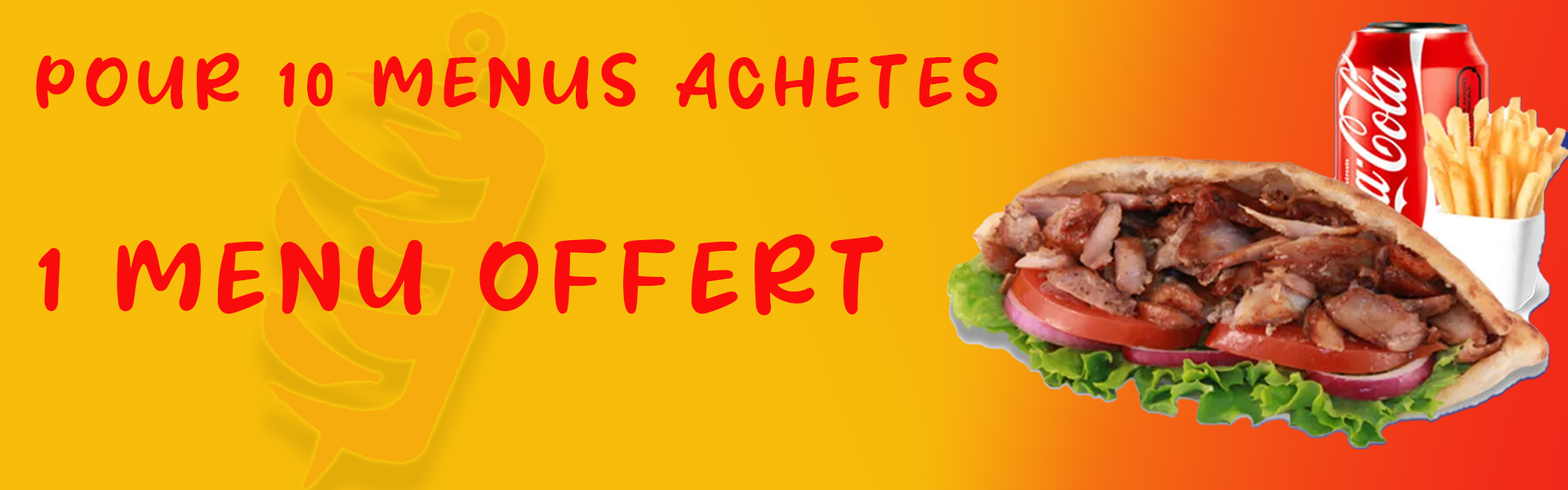
<style>
.page{position:relative;width:1568px;height:490px}
.page>*{position:absolute;margin:0}
.t1{font:58.8px "Waffle-Story";letter-spacing:0.14em;color:#fa0c0c;text-transform:uppercase}
.t2{font:83px "Waffle-Story";letter-spacing:0.14em;color:#fa0c0c;text-transform:uppercase}
</style>
<div class="page">
<p class="t1" style="left:36px;top:52px;width:963px;height:58px">Pour 10 menus achetes</p>
<p class="t2" style="left:38px;top:234px;width:846px;height:81px">1 menu offert</p>
</div>
